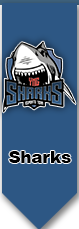
<style>
.page{position:relative;width:79px;height:229px;background:#2d5784}
.page>*{position:absolute;margin:0}
.t1{font:16.7px "Arial-Black";letter-spacing:-0.01em;color:#000000}
</style>
<div class="page">
<p class="t1" style="left:9px;top:151px;width:62px;height:12px">Sharks</p>
</div>
